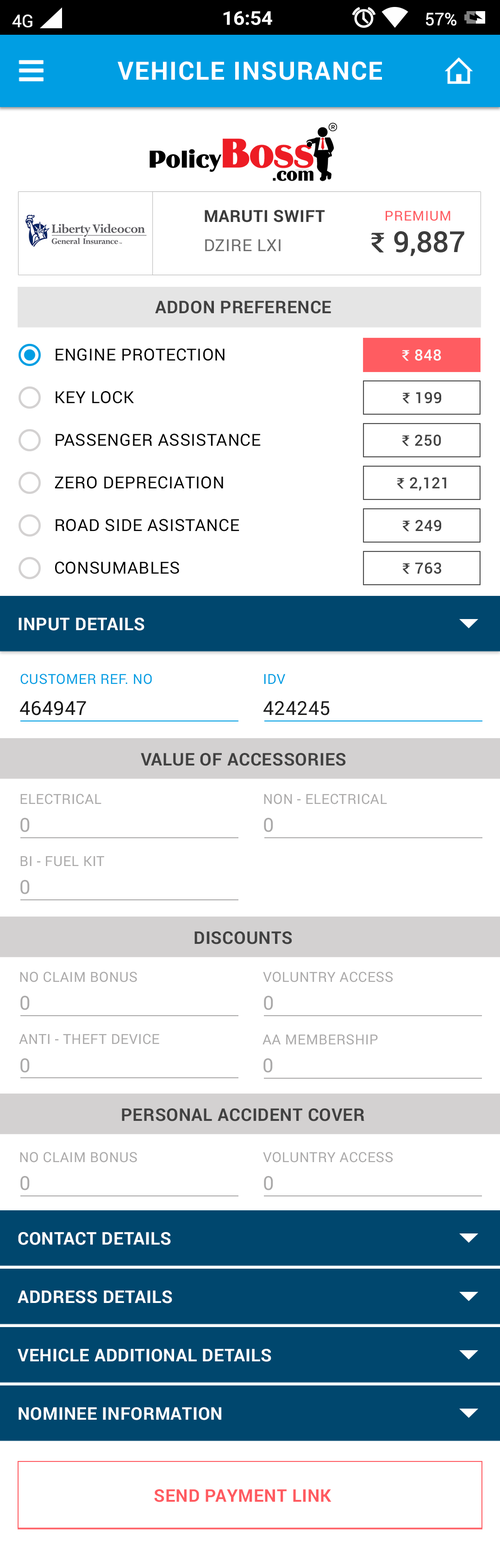
<style>
.page{position:relative;width:500px;height:1568px;background:#ffffff}
.page>*{position:absolute;margin:0}
.t1{font:25.1px "Roboto-Bold";letter-spacing:0.05em;color:#ffffff}
.t2{font:17.4px "Roboto-Bold";letter-spacing:0.025em;color:#414141;text-transform:uppercase}
.t3{font:16.7px "Roboto-Regular";letter-spacing:0.025em;color:#000000}
.t4{font:15.4px "Roboto-Medium";letter-spacing:0.025em;color:#fafafa}
.t5{font:15.4px "TimesNewRomanPSMT";letter-spacing:0.025em;color:#fafafa;font-weight:bold}
.t6{font:15.4px "Roboto-Medium";letter-spacing:0.025em;color:#424242}
.t7{font:15.4px "TimesNewRomanPSMT";letter-spacing:0.025em;color:#424242;font-weight:bold}
.t8{font:17.4px "Roboto-Bold";letter-spacing:0.025em;color:#ffffff;text-transform:uppercase}
.t9{font:13.9px "Roboto-Regular";letter-spacing:0.025em;color:#009ee3}
.t10{font:19.3px "Roboto-Regular";letter-spacing:0.025em;color:#161616;text-transform:uppercase}
.t11{font:19.3px "Roboto-Regular";letter-spacing:0.025em;color:#1e1e1e}
.t12{font:13.9px "Roboto-Regular";letter-spacing:0.025em;color:#aaa9a9}
.t13{font:19.3px "Roboto-Regular";letter-spacing:0.025em;color:#aaa9a9;text-transform:uppercase}
.t14{font:17.4px "Roboto-Bold";letter-spacing:0.025em;color:#ff5a60;text-transform:uppercase}
</style>
<div class="page">
<p class="t1" style="left:118px;top:61px;width:264px;height:19px">VEHICLE INSURANCE</p>
<p class="t2" style="left:155px;top:301px;width:176px;height:13px">ADDON PREFERENCE</p>
<p class="t3" style="left:56px;top:348px;width:169px;height:13px">ENGINE PROTECTION</p>
<p class="t4" style="left:402px;top:349px;width:40px;height:12px"><span class="t5">₹ </span>848</p>
<p class="t3" style="left:56px;top:391px;width:78px;height:13px">KEY LOCK</p>
<p class="t6" style="left:403px;top:392px;width:39px;height:12px"><span class="t7">₹ </span>199</p>
<p class="t3" style="left:56px;top:434px;width:205px;height:12px">PASSENGER ASSISTANCE</p>
<p class="t6" style="left:402px;top:435px;width:40px;height:11px"><span class="t7">₹ </span>250</p>
<p class="t3" style="left:55px;top:476px;width:168px;height:13px">ZERO DEPRECIATION</p>
<p class="t6" style="left:397px;top:477px;width:50px;height:14px"><span class="t7">₹ </span>2,121</p>
<p class="t3" style="left:56px;top:519px;width:184px;height:12px">ROAD SIDE ASISTANCE</p>
<p class="t6" style="left:403px;top:520px;width:39px;height:11px"><span class="t7">₹ </span>249</p>
<p class="t3" style="left:55px;top:562px;width:124px;height:12px">CONSUMABLES</p>
<p class="t6" style="left:403px;top:563px;width:39px;height:11px"><span class="t7">₹ </span>763</p>
<p class="t8" style="left:19px;top:618px;width:126px;height:13px">INPUT DETAILS</p>
<p class="t9" style="left:20px;top:674px;width:132px;height:10px">CUSTOMER REF. NO</p>
<p class="t9" style="left:264px;top:674px;width:22px;height:10px">IDV</p>
<p class="t10" style="left:20px;top:701px;width:66px;height:14px">464947</p>
<p class="t11" style="left:264px;top:701px;width:66px;height:14px">424245</p>
<p class="t2" style="left:141px;top:753px;width:205px;height:13px">VALUE OF ACCESSORIES</p>
<p class="t12" style="left:20px;top:794px;width:81px;height:10px">ELECTRICAL</p>
<p class="t12" style="left:264px;top:794px;width:123px;height:10px">NON - ELECTRICAL</p>
<p class="t13" style="left:20px;top:818px;width:10px;height:14px">0</p>
<p class="t13" style="left:264px;top:818px;width:9px;height:14px">0</p>
<p class="t12" style="left:20px;top:856px;width:84px;height:10px">BI - FUEL KIT</p>
<p class="t13" style="left:20px;top:880px;width:10px;height:14px">0</p>
<p class="t2" style="left:195px;top:931px;width:97px;height:13px">DISCOUNTS</p>
<p class="t12" style="left:20px;top:972px;width:117px;height:10px">NO CLAIM BONUS</p>
<p class="t12" style="left:263px;top:972px;width:130px;height:10px">VOLUNTRY ACCESS</p>
<p class="t13" style="left:20px;top:996px;width:10px;height:14px">0</p>
<p class="t13" style="left:264px;top:996px;width:9px;height:14px">0</p>
<p class="t12" style="left:19px;top:1034px;width:140px;height:10px">ANTI - THEFT DEVICE</p>
<p class="t12" style="left:263px;top:1034px;width:115px;height:11px">AA MEMBERSHIP</p>
<p class="t13" style="left:20px;top:1058px;width:10px;height:15px">0</p>
<p class="t13" style="left:264px;top:1058px;width:9px;height:15px">0</p>
<p class="t2" style="left:122px;top:1108px;width:243px;height:13px">PERSONAL ACCIDENT COVER</p>
<p class="t12" style="left:20px;top:1152px;width:117px;height:11px">NO CLAIM BONUS</p>
<p class="t12" style="left:263px;top:1152px;width:130px;height:11px">VOLUNTRY ACCESS</p>
<p class="t13" style="left:20px;top:1176px;width:10px;height:14px">0</p>
<p class="t13" style="left:264px;top:1176px;width:9px;height:14px">0</p>
<p class="t8" style="left:18px;top:1232px;width:153px;height:13px">CONTACT DETAILS</p>
<p class="t8" style="left:18px;top:1290px;width:154px;height:13px">ADDRESS DETAILS</p>
<p class="t8" style="left:18px;top:1349px;width:254px;height:13px">VEHICLE ADDITIONAL DETAILS</p>
<p class="t8" style="left:19px;top:1407px;width:202px;height:13px">NOMINEE INFORMATION</p>
<p class="t14" style="left:154px;top:1489px;width:178px;height:13px">SEND PAYMENT LINK</p>
</div>
